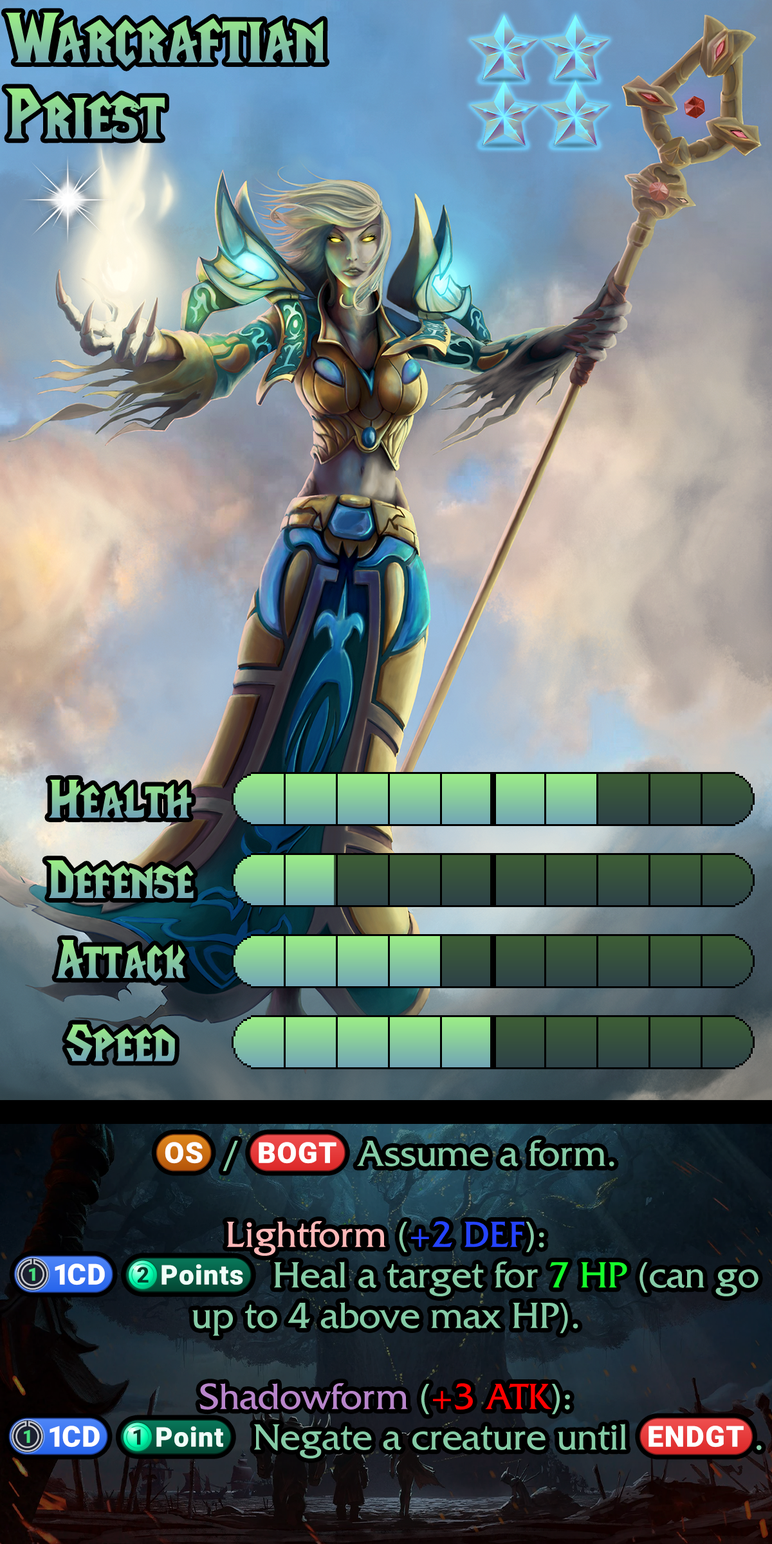
<style>
.page{position:relative;width:772px;height:1544px}
.page>*{position:absolute;margin:0}
.t1{font:121.6px "LifeCraft"}
.t2{font:92.7px "LifeCraft"}
.t3{font:38px/40.5px "FrizQuadrataStd"}
.t4{font:38px/40.5px "stoogedings-Regular";letter-spacing:0.28em}
.t5{font:38px/40.5px "FrizQuadrataStd";letter-spacing:0.28em}
.t6{font:38px/40.5px "stoogedings-Regular"}
.t7{font:38px/81.1px "FrizQuadrataStd"}
.t8{font:35.5px/40.5px "stoogedings-Regular";letter-spacing:0.28em}
</style>
<div class="page">
<p class="t1" style="left:5px;top:12px;width:321px;height:55px">Warcraftian</p>
<p class="t1" style="left:6px;top:88px;width:159px;height:51px">Priest</p>
<p class="t2" style="left:49px;top:780px;width:143px;height:38px">Health</p>
<p class="t2" style="left:46px;top:860px;width:148px;height:39px">Defense</p>
<p class="t2" style="left:56px;top:939px;width:130px;height:43px">Attack</p>
<p class="t2" style="left:66px;top:1024px;width:109px;height:38px">Speed</p>
<p class="t3" style="left:8px;top:1134px;width:754px;height:325px;text-align:center"><span class="t4">(OS)</span><span class="t5">/</span><span class="t6">(BOGT)</span> Assume a form.<br><span class="t7">Lightform </span>(+2 DEF):<br><span class="t4">(1CD)</span><span class="t8">(2 points)</span> Heal a target for 7 HP (can go up to 4 above max HP).<br><span class="t7">Shadowform</span> (+3 ATK):<br><span class="t4">(1CD)</span><span class="t8">(1 point)</span> Negate a creature until <span class="t6">(ENDGT)</span>.</p>
</div>
